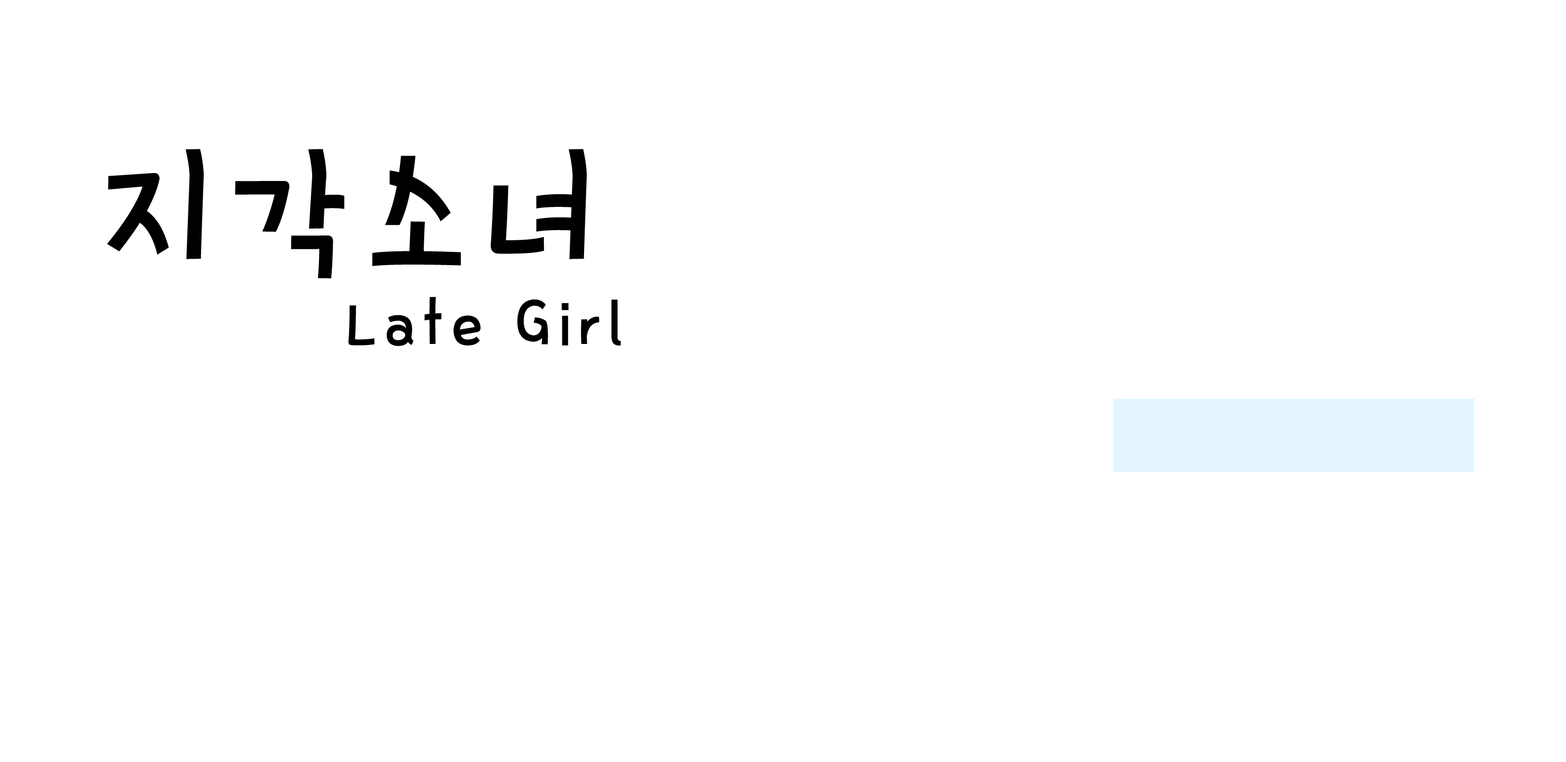
<style>
.page{position:relative;width:1566px;height:762px;background:#ffffff}
.page>*{position:absolute;margin:0}
.t1{font:148.1px "THEMacaron";letter-spacing:0.15em;color:#000000}
.t2{font:63.5px "THEMacaron";letter-spacing:0.15em;color:#000000}
</style>
<div class="page">
<p class="t1" style="left:107px;top:149px;width:480px;height:129px">지각소녀</p>
<p class="t2" style="left:348px;top:297px;width:273px;height:49px">Late Girl</p>
</div>
